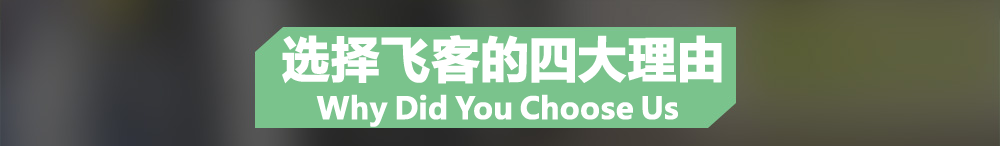
<style>
.page{position:relative;width:1000px;height:146px}
.page>*{position:absolute;margin:0}
.t1{font:48px "MicrosoftYaHei";letter-spacing:0.025em;color:#ffffff;font-weight:bold}
.t2{font:30px "MicrosoftYaHei";letter-spacing:0.025em;color:#ffffff;font-weight:bold}
</style>
<div class="page">
<p class="t1" style="left:282px;top:35px;width:440px;height:49px">选择飞客的四大理由</p>
<p class="t2" style="left:316px;top:94px;width:362px;height:33px">Why Did You Choose Us</p>
</div>
